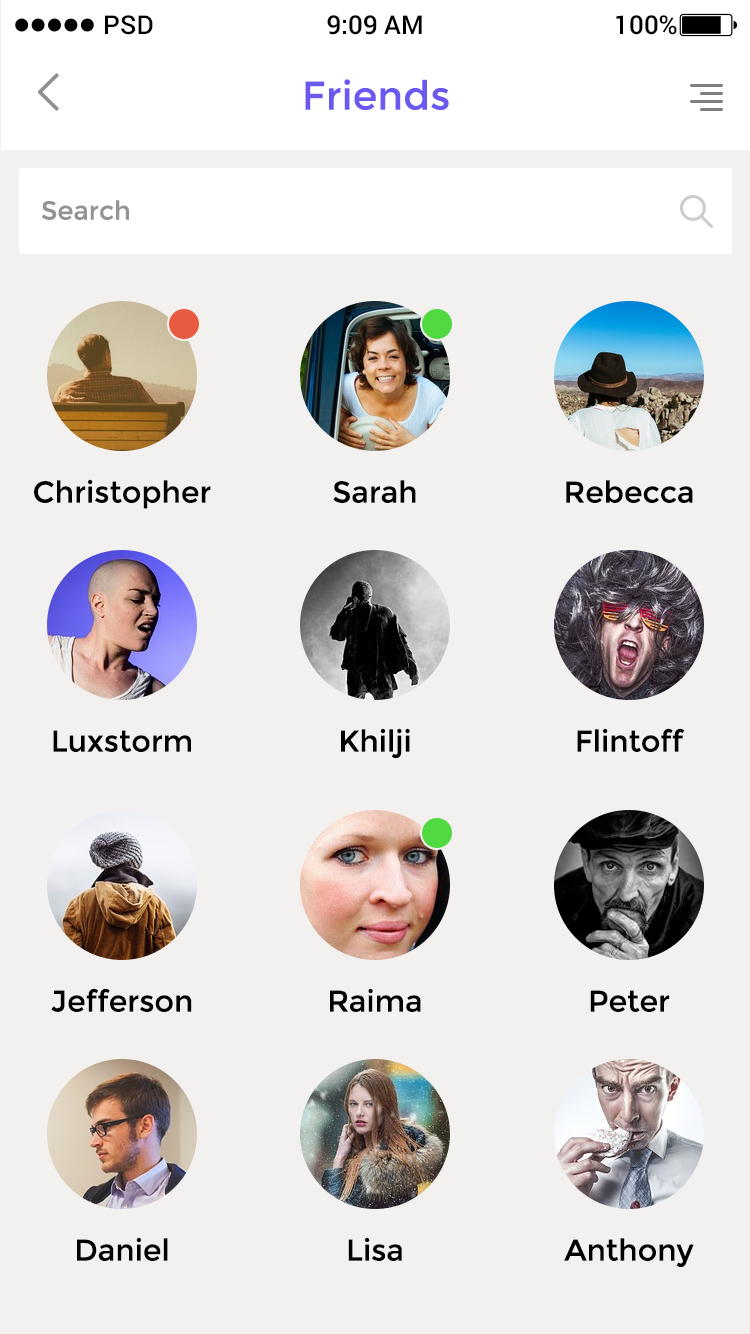
<style>
.page{position:relative;width:750px;height:1334px;background:#f2f1ef}
.page>*{position:absolute;margin:0}
.t1{font:26px "Roboto-Medium";color:#000000}
.t2{font:40px "Montserrat-Regular";color:#6b59ef}
.t3{font:26px "Montserrat-Regular";color:#939393}
.t4{font:30px "Montserrat-Regular";color:#000000}
</style>
<div class="page">
<p class="t1" style="left:105px;top:15px;width:48px;height:20px">PSD</p>
<p class="t1" style="left:327px;top:15px;width:95px;height:20px">9:09 AM</p>
<p class="t1" style="left:616px;top:15px;width:61px;height:20px">100%</p>
<p class="t2" style="left:305px;top:79px;width:144px;height:31px">Friends</p>
<p class="t3" style="left:42px;top:200px;width:87px;height:20px">Search</p>
<p class="t4" style="left:34px;top:479px;width:177px;height:30px">Christopher</p>
<p class="t4" style="left:333px;top:480px;width:83px;height:23px">Sarah</p>
<p class="t4" style="left:566px;top:480px;width:127px;height:23px">Rebecca</p>
<p class="t4" style="left:53px;top:730px;width:138px;height:22px">Luxstorm</p>
<p class="t4" style="left:341px;top:728px;width:69px;height:31px">Khilji</p>
<p class="t4" style="left:577px;top:728px;width:108px;height:24px">Flintoff</p>
<p class="t4" style="left:51px;top:988px;width:141px;height:24px">Jefferson</p>
<p class="t4" style="left:330px;top:988px;width:91px;height:24px">Raima</p>
<p class="t4" style="left:590px;top:990px;width:80px;height:22px">Peter</p>
<p class="t4" style="left:77px;top:1237px;width:91px;height:24px">Daniel</p>
<p class="t4" style="left:348px;top:1237px;width:54px;height:24px">Lisa</p>
<p class="t4" style="left:564px;top:1238px;width:130px;height:30px">Anthony</p>
</div>
